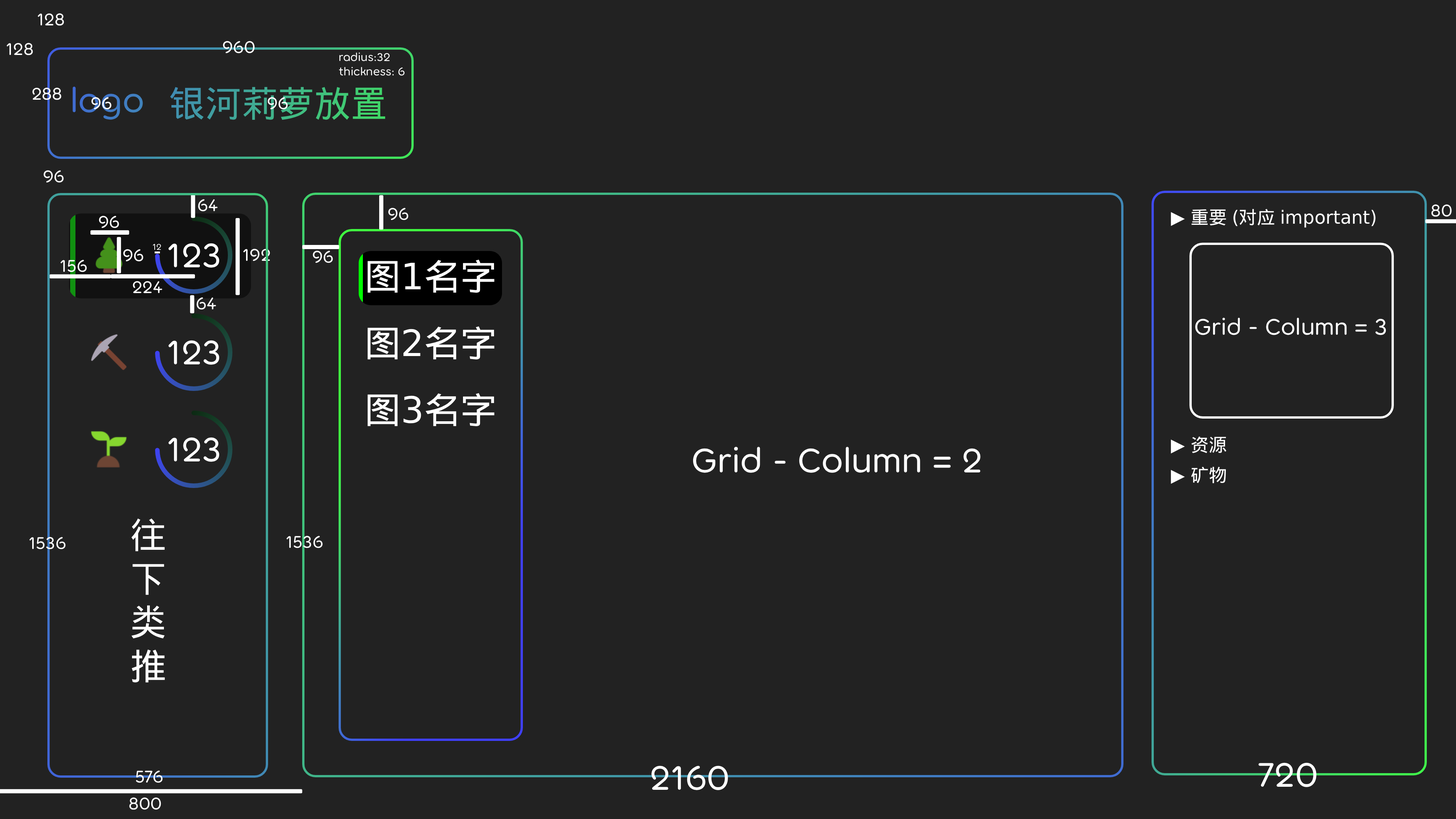
<style>
.page{position:relative;width:1456px;height:819px;background:#222222}
.page>*{position:absolute;margin:0}
.t1{font:18.2px "TorusPro-Regular";color:#ffffff}
.t2{font:12.1px "TorusPro-Regular";color:#ffffff}
.t3{font:36.4px "TorusPro-Regular";color:#407ac7}
.t4{font:36.4px "DroidSansFallback"}
.t5{font:18.2px "DejaVuSans";color:#ffffff}
.t6{font:18.2px "DroidSansFallback";color:#ffffff}
.t7{font:9.1px "TorusPro-Regular";color:#ffffff}
.t8{font:36.4px "TorusPro-Regular";color:#ffffff}
.t9{font:36.4px "DroidSansFallback";color:#ffffff}
.t10{font:36.4px "DejaVuSans";color:#ffffff}
.t11{font:24.3px "TorusPro-Regular";color:#ffffff}
</style>
<div class="page">
<p class="t1" style="left:38px;top:13px;width:26px;height:13px">128</p>
<p class="t1" style="left:223px;top:41px;width:32px;height:12px">960</p>
<p class="t1" style="left:6px;top:43px;width:27px;height:12px">128</p>
<p class="t2" style="left:339px;top:52px;width:66px;height:24px">radius:32<br>thickness: 6</p>
<p class="t1" style="left:32px;top:88px;width:29px;height:12px">288</p>
<p class="t3" style="left:72px;top:86px;width:71px;height:34px">logo</p>
<p class="t4" style="left:170px;top:87px;width:215px;height:33px">银河莉萝放置</p>
<p class="t1" style="left:91px;top:97px;width:20px;height:13px">96</p>
<p class="t1" style="left:268px;top:97px;width:20px;height:13px">96</p>
<p class="t1" style="left:44px;top:170px;width:20px;height:13px">96</p>
<p class="t1" style="left:198px;top:199px;width:20px;height:13px">64</p>
<p class="t1" style="left:388px;top:208px;width:20px;height:12px">96</p>
<p class="t5" style="left:1171px;top:209px;width:205px;height:18px">▶ <span class="t6">重要 </span>(<span class="t6">对应 </span>important)</p>
<p class="t1" style="left:1431px;top:204px;width:21px;height:13px">80</p>
<p class="t1" style="left:99px;top:216px;width:20px;height:12px">96</p>
<p class="t7" style="left:153px;top:244px;width:8px;height:6px">12</p>
<p class="t8" style="left:168px;top:243px;width:52px;height:25px">123</p>
<p class="t1" style="left:123px;top:249px;width:20px;height:13px">96</p>
<p class="t1" style="left:243px;top:249px;width:27px;height:12px">192</p>
<p class="t1" style="left:313px;top:251px;width:20px;height:12px">96</p>
<p class="t1" style="left:60px;top:260px;width:27px;height:12px">156</p>
<p class="t9" style="left:367px;top:259px;width:127px;height:34px">图<span class="t10">1</span>名字</p>
<p class="t1" style="left:133px;top:281px;width:29px;height:12px">224</p>
<p class="t1" style="left:196px;top:297px;width:20px;height:13px">64</p>
<p class="t11" style="left:1195px;top:318px;width:191px;height:17px">Grid - Column = 3</p>
<p class="t9" style="left:367px;top:326px;width:127px;height:33px">图<span class="t10">2</span>名字</p>
<p class="t8" style="left:168px;top:340px;width:52px;height:25px">123</p>
<p class="t9" style="left:367px;top:393px;width:127px;height:33px">图<span class="t10">3</span>名字</p>
<p class="t8" style="left:168px;top:437px;width:52px;height:25px">123</p>
<p class="t6" style="left:1171px;top:436px;width:56px;height:17px"><span class="t5">▶ </span>资源</p>
<p class="t8" style="left:693px;top:447px;width:288px;height:26px">Grid - Column = 2</p>
<p class="t6" style="left:1171px;top:467px;width:55px;height:17px"><span class="t5">▶ </span>矿物</p>
<p class="t9" style="left:131px;top:518px;width:34px;height:164px">往<br>下<br>类<br>推</p>
<p class="t1" style="left:29px;top:537px;width:37px;height:12px">1536</p>
<p class="t1" style="left:286px;top:536px;width:37px;height:12px">1536</p>
<p class="t1" style="left:136px;top:770px;width:27px;height:13px">576</p>
<p class="t8" style="left:651px;top:766px;width:77px;height:24px">2160</p>
<p class="t8" style="left:1258px;top:762px;width:58px;height:25px">720</p>
<p class="t1" style="left:129px;top:797px;width:32px;height:13px">800</p>
</div>
